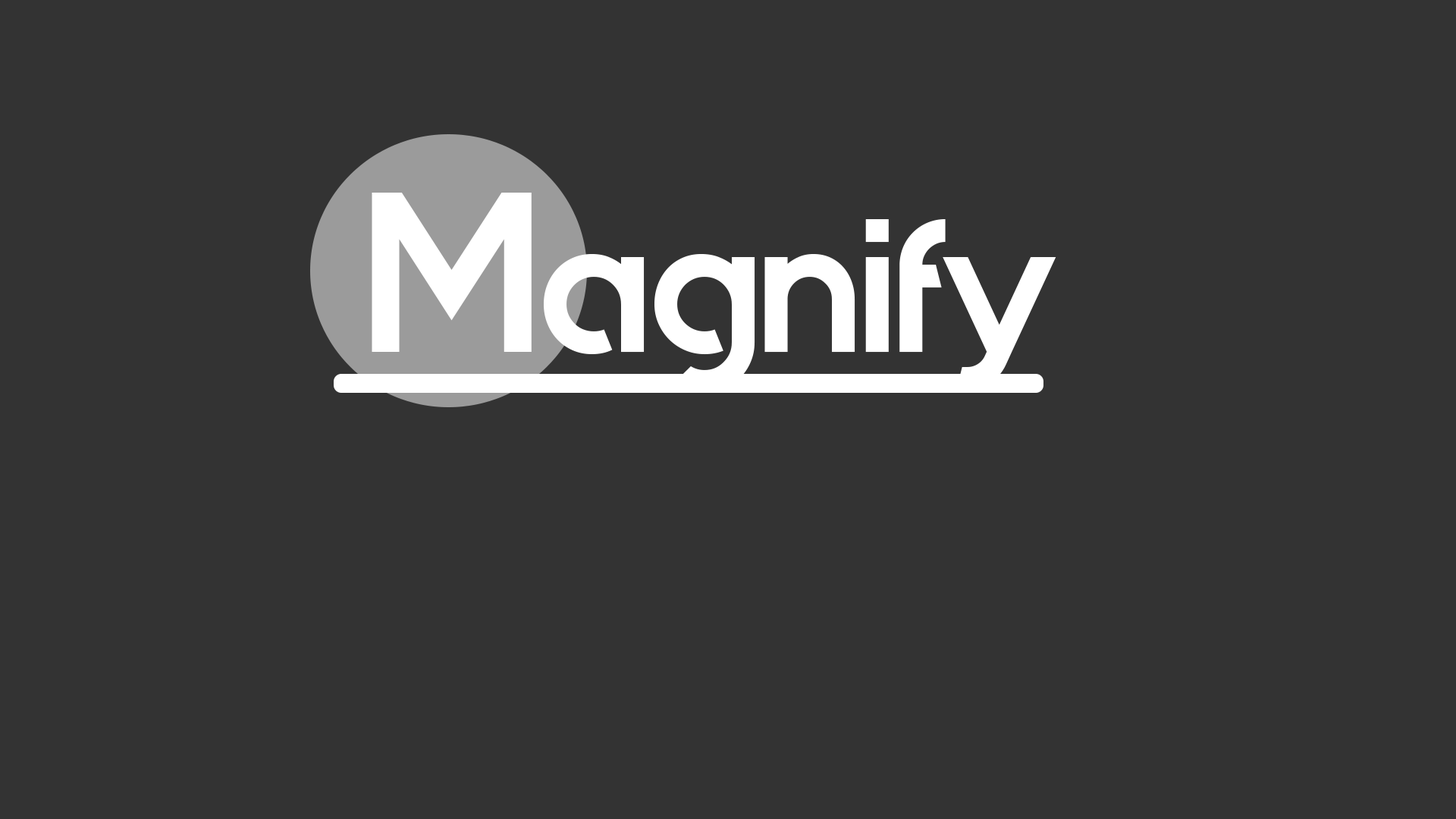
<style>
.page{position:relative;width:1456px;height:819px;background:#333333}
.page>*{position:absolute;margin:0}
.t1{font:189.6px "Quantify-Bold";color:#ffffff}
.t2{font:227.5px "Quantify-Bold";color:#ffffff}
</style>
<div class="page">
<p class="t1" style="left:372px;top:193px;width:684px;height:200px"><span class="t2">M</span>agnify</p>
</div>
